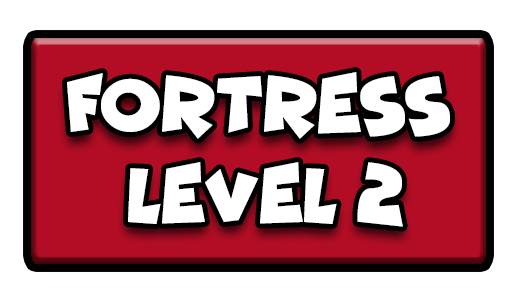
<style>
.page{position:relative;width:517px;height:301px;background:#ffffff}
.page>*{position:absolute;margin:0}
.t1{font:77.7px "Funhouse";color:#ffffff;scale:0.95 1}
</style>
<div class="page">
<p class="t1" style="left:67px;top:72px;width:383px;height:67px">FORTRESS</p>
<p class="t1" style="left:128px;top:162px;width:275px;height:65px">LEVEL 2</p>
</div>
